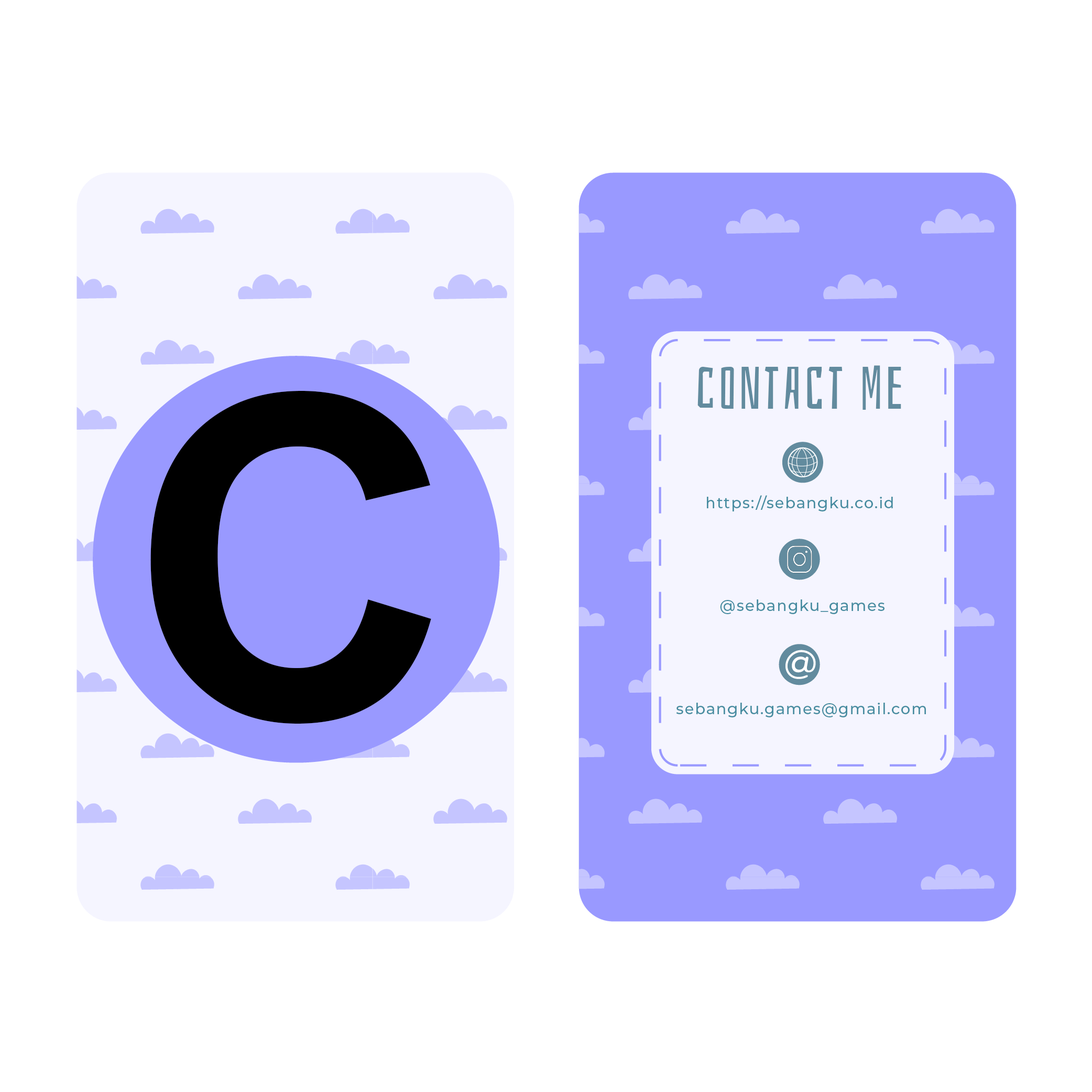
<style>
.page{position:relative;width:1092px;height:1092px;background:#ffffff}
.page>*{position:absolute;margin:0}
.t1{font:58.9px "Bahiana-Regular";letter-spacing:0.057em;color:#628b9e}
.t2{font:449.8px "Arial-BoldMT";letter-spacing:0.057em;color:#000000}
.t3{font:15.3px "Montserrat-Medium";letter-spacing:0.057em;color:#468ca0}
</style>
<div class="page">
<p class="t1" style="left:697px;top:365px;width:204px;height:45px">contact me</p>
<p class="t2" style="left:150px;top:391px;width:281px;height:333px">C</p>
<p class="t3" style="left:707px;top:495px;width:186px;height:16px">https://sebangku.co.id</p>
<p class="t3" style="left:720px;top:599px;width:164px;height:15px">@sebangku_games</p>
<p class="t3" style="left:676px;top:703px;width:250px;height:14px">sebangku.games@gmail.com</p>
</div>
